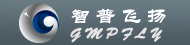
<style>
.page{position:relative;width:190px;height:45px}
.page>*{position:absolute;margin:0}
.t1{font:20px "STLiti";letter-spacing:0.24em;color:#ffffff;font-weight:bold}
.t2{font:15px "BrushScriptStd";letter-spacing:0.24em;color:#e7e4e4;font-weight:bold}
</style>
<div class="page">
<p class="t1" style="left:71px;top:8px;width:95px;height:16px">智普飞扬</p>
<p class="t2" style="left:70px;top:27px;width:93px;height:16px">GMPFLY</p>
</div>
